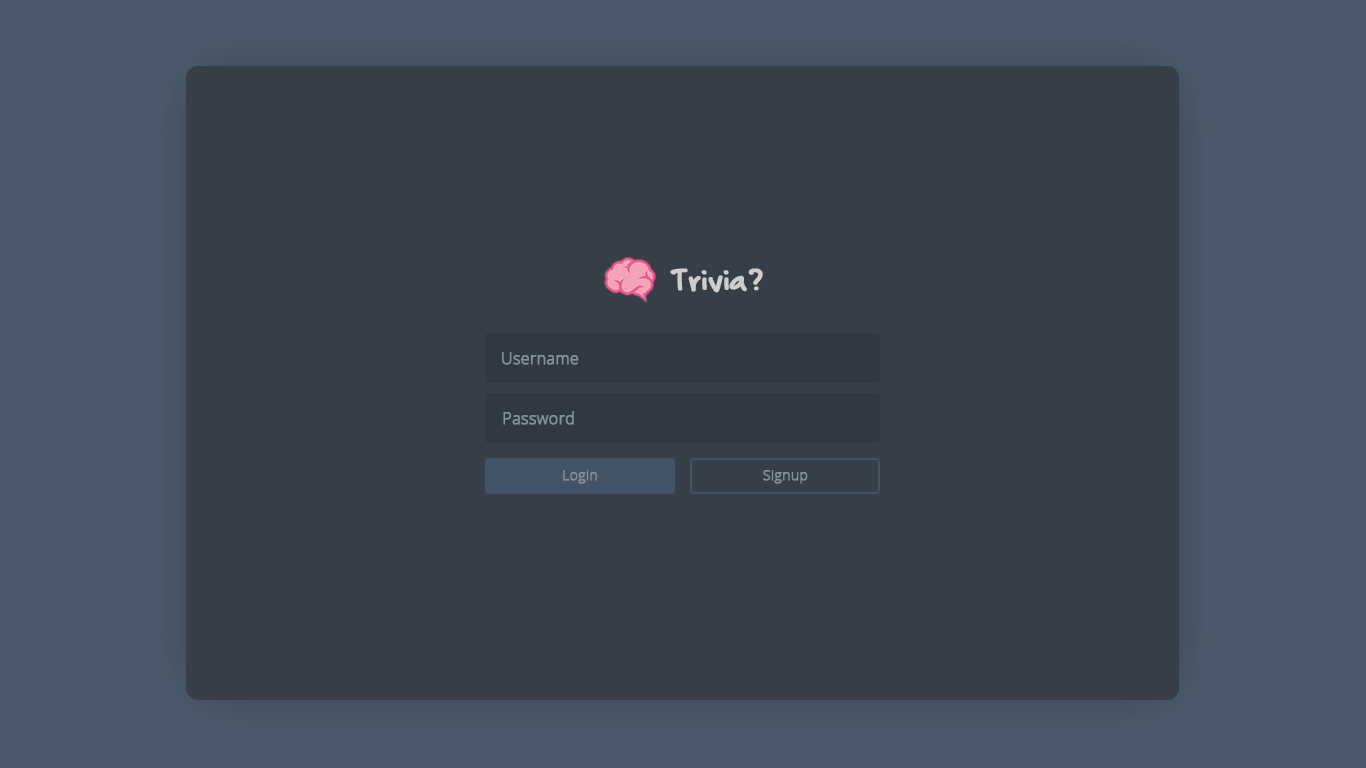
<style>
.page{position:relative;width:1366px;height:768px;background:#363e47}
.page>*{position:absolute;margin:0}
.t1{font:32px "FinurligDEMO-Regular";color:#cdcdcd;font-weight:bold}
.t2{font:16px "OpenSans-Light";color:#84919c;font-weight:bold}
.t3{font:14px "OpenSans-Light";color:#84919c;font-weight:bold}
</style>
<div class="page">
<p class="t1" style="left:670px;top:268px;width:93px;height:25px">Trivia?</p>
<p class="t2" style="left:502px;top:352px;width:77px;height:13px">Username</p>
<p class="t2" style="left:503px;top:411px;width:71px;height:14px">Password</p>
<p class="t3" style="left:563px;top:470px;width:34px;height:14px">Login</p>
<p class="t3" style="left:763px;top:470px;width:45px;height:14px">Signup</p>
</div>
